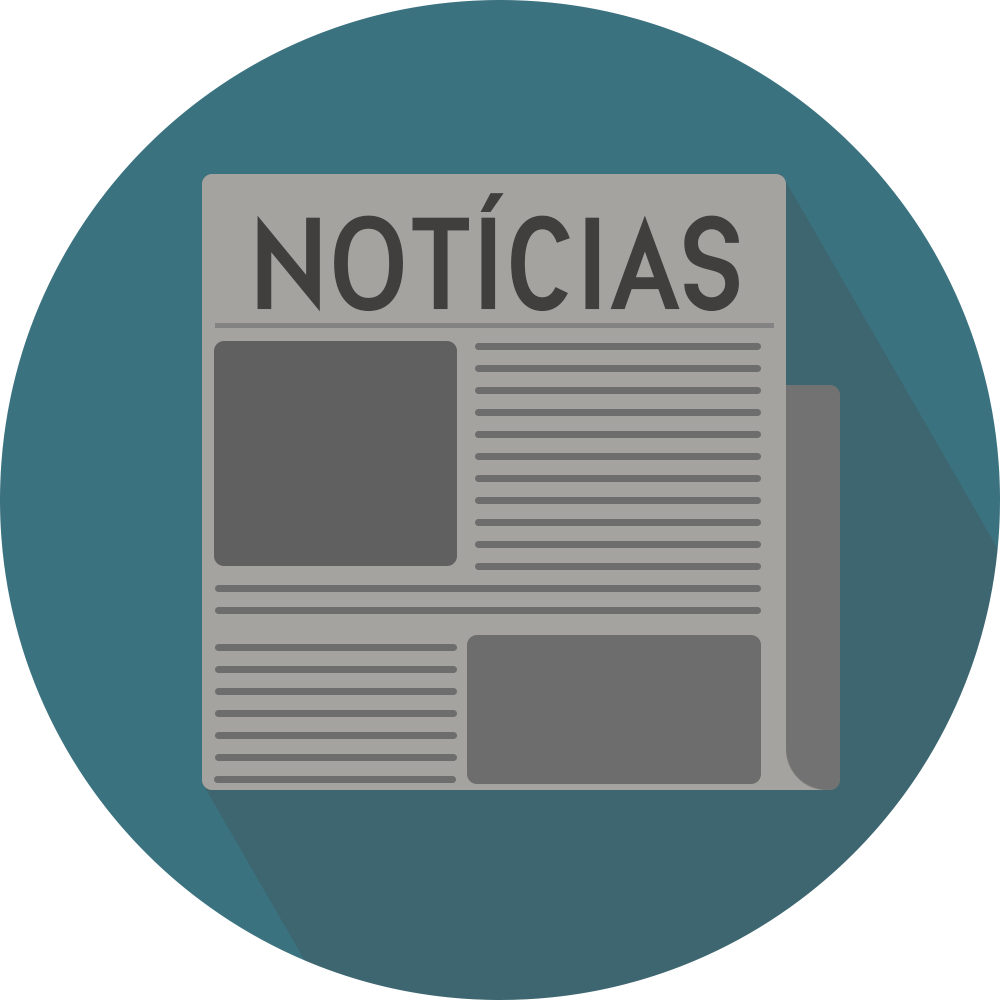
<style>
.page{position:relative;width:1000px;height:1000px;background:#3a727f}
.page>*{position:absolute;margin:0}
.t1{font:125px "AprikasBoldDemo";color:#403f3d}
</style>
<div class="page">
<p class="t1" style="left:257px;top:193px;width:482px;height:119px">NOTÍCIAS</p>
</div>
